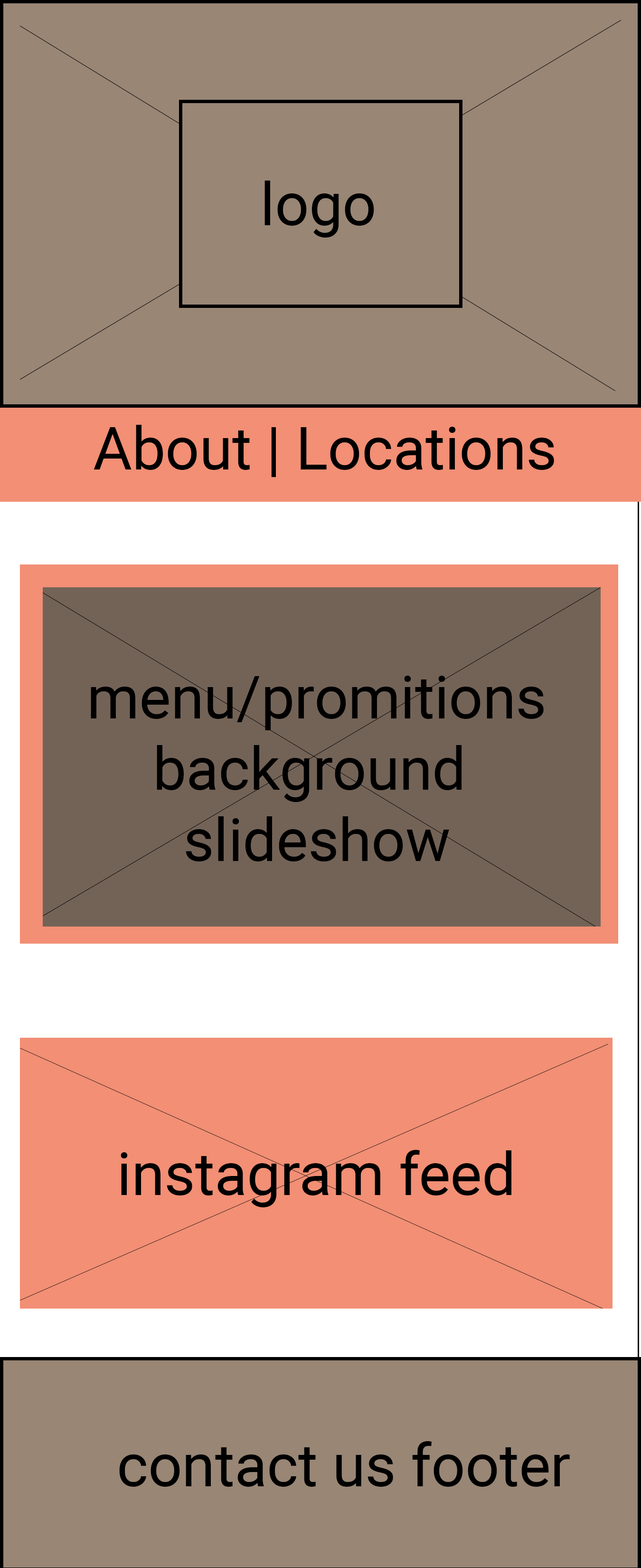
<style>
.page{position:relative;width:641px;height:1568px;background:#998675}
.page>*{position:absolute;margin:0}
.t1{font:59.4px "Roboto-Regular";color:#000000}
</style>
<div class="page">
<p class="t1" style="left:265px;top:181px;width:109px;height:57px">logo</p>
<p class="t1" style="left:94px;top:425px;width:461px;height:52px">About | Locations</p>
<p class="t1" style="left:91px;top:676px;width:453px;height:185px;text-align:center">menu/promitions<br>background <br>slideshow</p>
<p class="t1" style="left:121px;top:1150px;width:391px;height:57px">instagram feed</p>
<p class="t1" style="left:119px;top:1441px;width:451px;height:46px">contact us footer</p>
</div>
